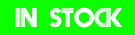
<style>
.page{position:relative;width:135px;height:35px;background:#0cff00}
.page>*{position:absolute;margin:0}
.t1{font:24px "Prisma";color:#ffffff}
</style>
<div class="page">
<p class="t1" style="left:15px;top:7px;width:107px;height:21px">in   stock</p>
</div>
